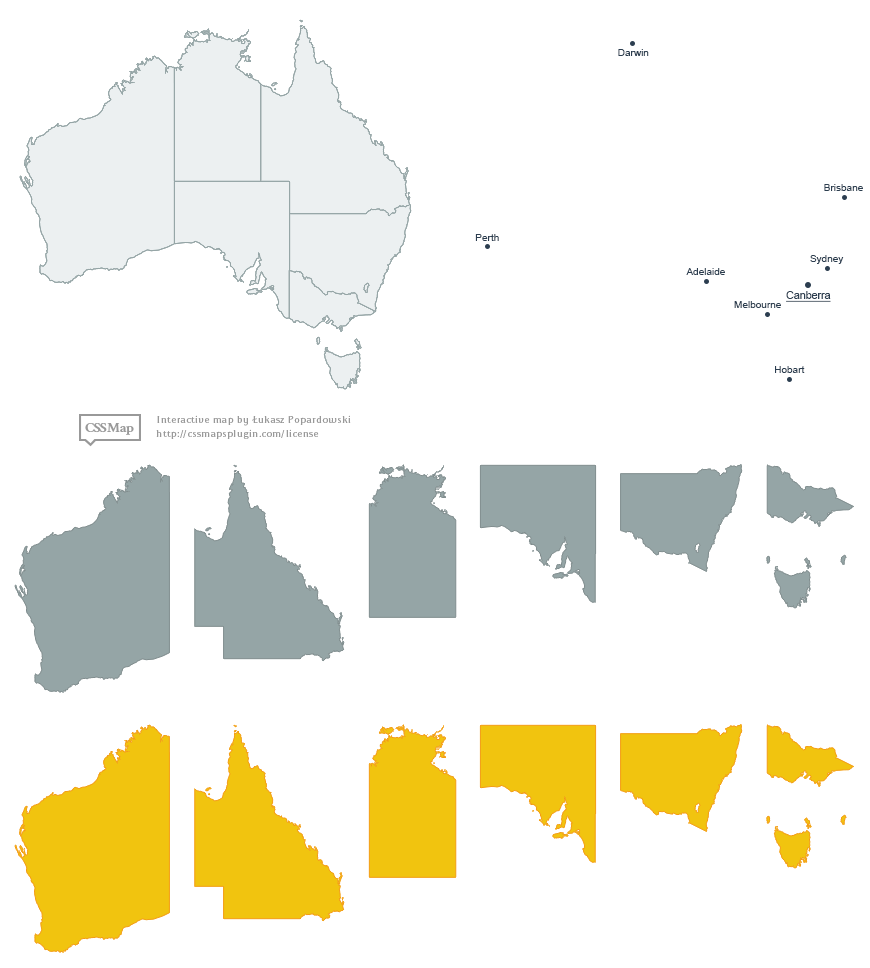
<style>
.page{position:relative;width:870px;height:968px;background:#ffffff}
.page>*{position:absolute;margin:0}
.t1{font:10px "ArialMT";color:#2c3e50}
.t2{font:11px "ArialMT";color:#2c3e50;text-decoration:underline;scale:0.97 1}
</style>
<div class="page">
<p class="t1" style="left:618px;top:49px;width:31px;height:7px">Darwin</p>
<p class="t1" style="left:824px;top:184px;width:39px;height:7px">Brisbane</p>
<p class="t1" style="left:475px;top:234px;width:24px;height:7px">Perth</p>
<p class="t1" style="left:810px;top:255px;width:34px;height:9px">Sydney</p>
<p class="t1" style="left:686px;top:268px;width:39px;height:7px">Adelaide</p>
<p class="t2" style="left:786px;top:291px;width:45px;height:11px">Canberra</p>
<p class="t1" style="left:734px;top:301px;width:47px;height:7px">Melbourne</p>
<p class="t1" style="left:775px;top:366px;width:30px;height:7px">Hobart</p>
</div>
